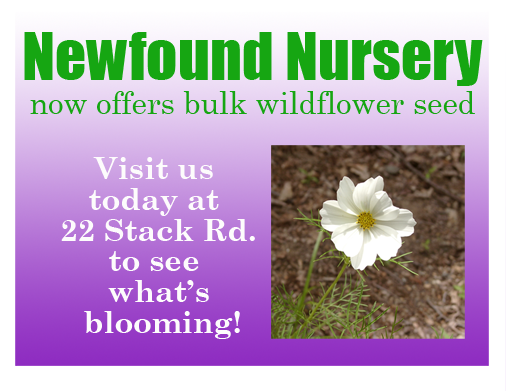
<style>
.page{position:relative;width:506px;height:391px}
.page>*{position:absolute;margin:0}
.t1{font:61.3px "Impact";color:#16a612}
.t2{font:30.6px "CenturySchoolbook";color:#16a612}
.t3{font:30.6px/30.6px "CenturySchoolbook-Bold";color:#fdfcfc}
</style>
<div class="page">
<p class="t1" style="left:24px;top:32px;width:459px;height:54px">Newfound Nursery</p>
<p class="t2" style="left:30px;top:91px;width:445px;height:23px">now offers bulk wildflower seed</p>
<p class="t3" style="left:61px;top:157px;width:194px;height:182px;text-align:center">Visit us <br>today at <br>22 Stack Rd.<br>to see <br>what’s<br> blooming!</p>
</div>
